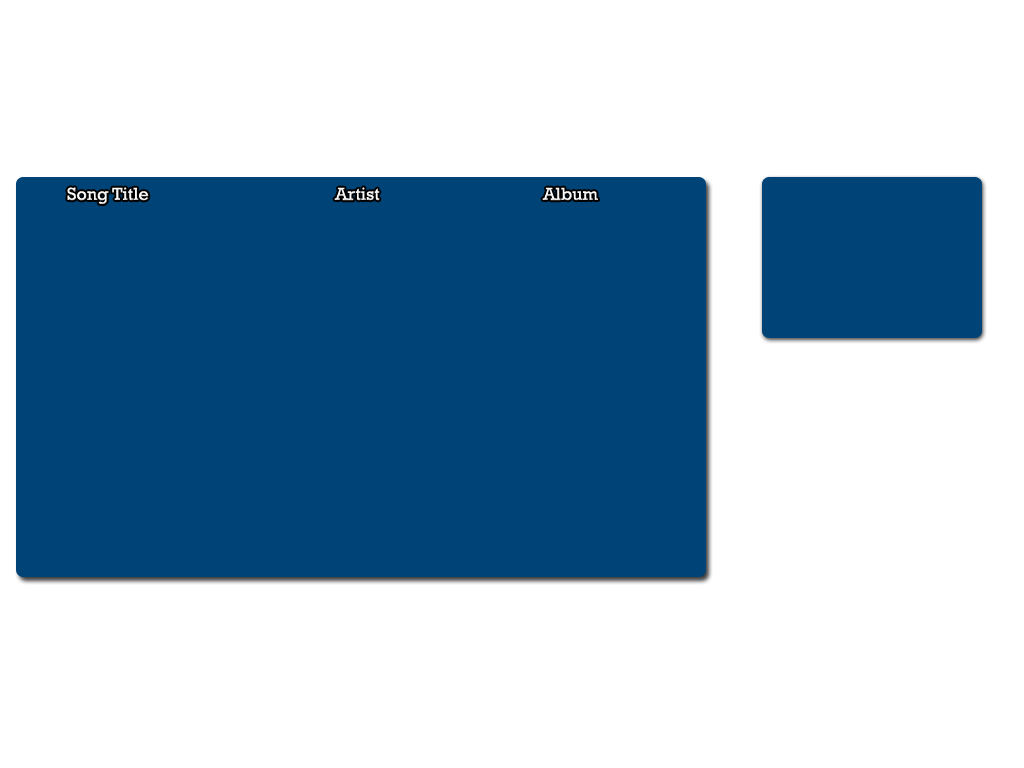
<style>
.page{position:relative;width:1024px;height:768px;background:#ffffff}
.page>*{position:absolute;margin:0}
.t1{font:18px "Rockwell";color:#ffffff}
</style>
<div class="page">
<p class="t1" style="left:67px;top:187px;width:82px;height:17px">Song Title</p>
<p class="t1" style="left:334px;top:187px;width:46px;height:14px">Artist</p>
<p class="t1" style="left:542px;top:187px;width:56px;height:14px">Album</p>
</div>
